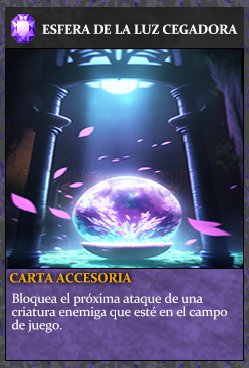
<style>
.page{position:relative;width:249px;height:368px}
.page>*{position:absolute;margin:0}
.t1{font:13.3px "Constantia-Bold";letter-spacing:-0.02em;color:#ffffff}
.t2{font:13.3px "Constantia-Bold";letter-spacing:-0.02em;color:#f2ac05}
.t3{font:13.3px/13.3px "Constantia";letter-spacing:-0.02em;color:#ffffff}
</style>
<div class="page">
<p class="t1" style="left:42px;top:24px;width:196px;height:10px">ESFERA DE LA LUZ CEGADORA</p>
<p class="t2" style="left:10px;top:273px;width:122px;height:10px">CARTA ACCESORIA</p>
<p class="t3" style="left:12px;top:293px;width:215px;height:40px">Bloquea el próxima ataque de una<br>criatura enemiga que esté en el campo<br>de juego.</p>
</div>
